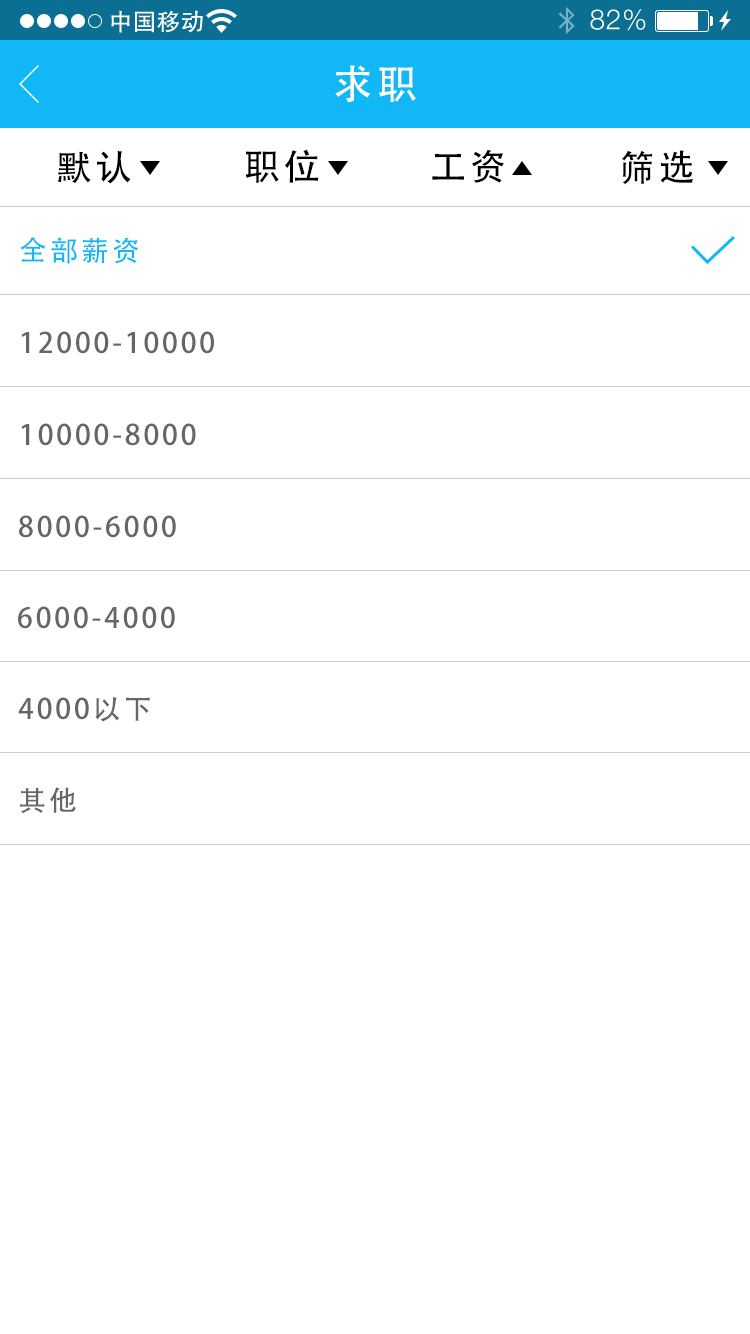
<style>
.page{position:relative;width:750px;height:1334px;background:#ffffff}
.page>*{position:absolute;margin:0}
.t1{font:40px "AdobeHeitiStd-Regular";letter-spacing:0.104em;color:#ffffff}
.t2{font:36px "AdobeHeitiStd-Regular";letter-spacing:0.104em;color:#000000}
.t3{font:28px "AdobeHeitiStd-Regular";letter-spacing:0.104em;color:#12b8f6}
.t4{font:28px "AdobeHeitiStd-Regular";letter-spacing:0.104em;color:#666666}
</style>
<div class="page">
<p class="t1" style="left:335px;top:65px;width:81px;height:38px">求职</p>
<p class="t2" style="left:245px;top:149px;width:73px;height:34px">职位</p>
<p class="t2" style="left:432px;top:149px;width:72px;height:34px">工资</p>
<p class="t2" style="left:621px;top:150px;width:73px;height:35px">筛选</p>
<p class="t2" style="left:57px;top:151px;width:74px;height:33px">默认</p>
<p class="t3" style="left:20px;top:237px;width:119px;height:27px">全部薪资</p>
<p class="t4" style="left:21px;top:331px;width:193px;height:23px">12000-10000</p>
<p class="t4" style="left:21px;top:423px;width:175px;height:23px">10000-8000</p>
<p class="t4" style="left:19px;top:515px;width:157px;height:23px">8000-6000</p>
<p class="t4" style="left:18px;top:606px;width:157px;height:23px">6000-4000</p>
<p class="t4" style="left:18px;top:697px;width:132px;height:25px">4000以下</p>
<p class="t4" style="left:20px;top:787px;width:56px;height:27px">其他</p>
</div>
